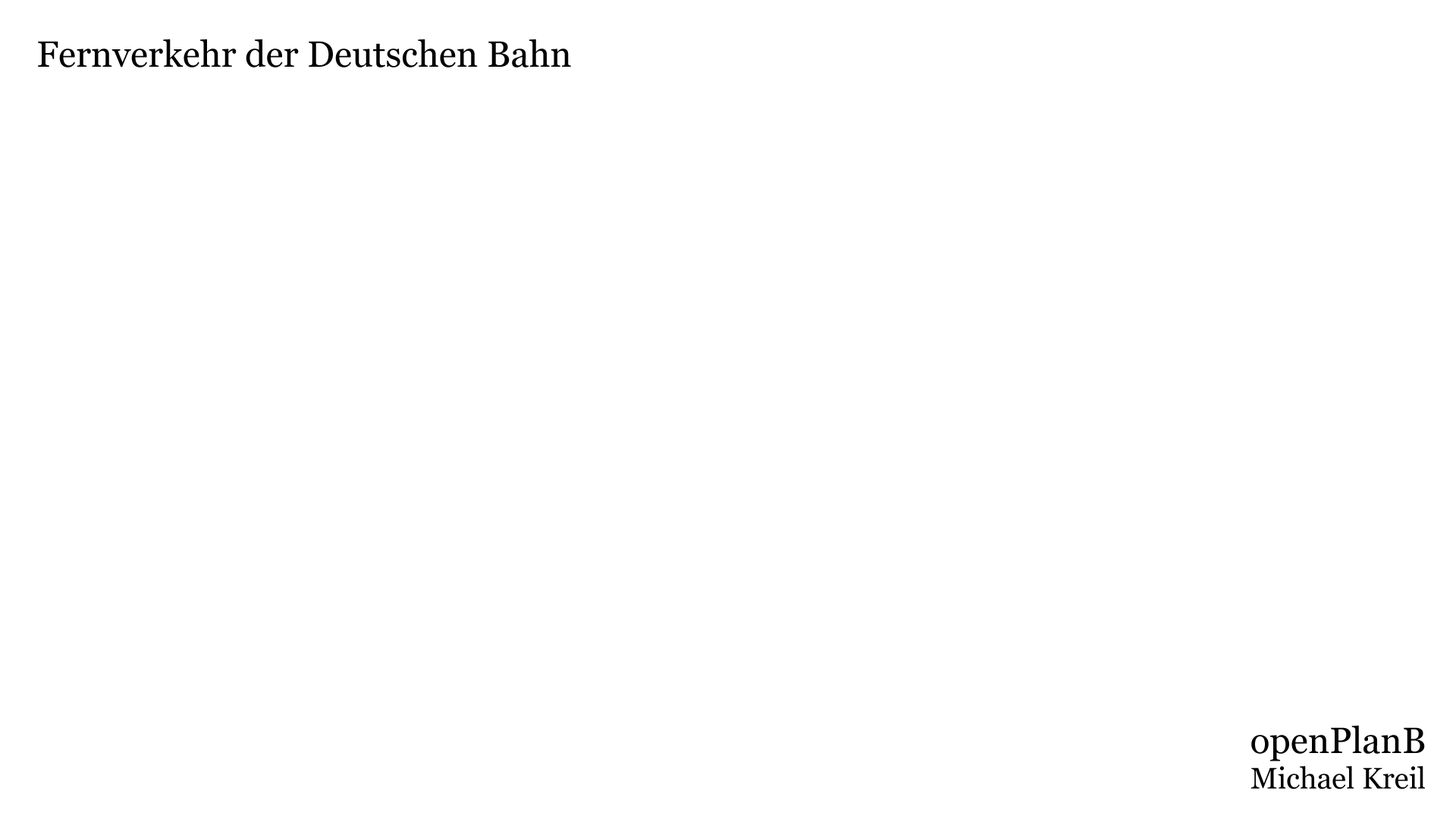
<style>
.page{position:relative;width:1456px;height:819px;background:#ffffff}
.page>*{position:absolute;margin:0}
.t1{font:36.4px "Georgia";color:#000000}
.t2{font:29.6px "Georgia";color:#000000}
</style>
<div class="page">
<p class="t1" style="left:38px;top:39px;width:533px;height:28px">Fernverkehr der Deutschen Bahn</p>
<p class="t2" style="left:1250px;top:725px;width:175px;height:64px;text-align:right"><span class="t1">openPlanB<br></span>Michael Kreil</p>
</div>
